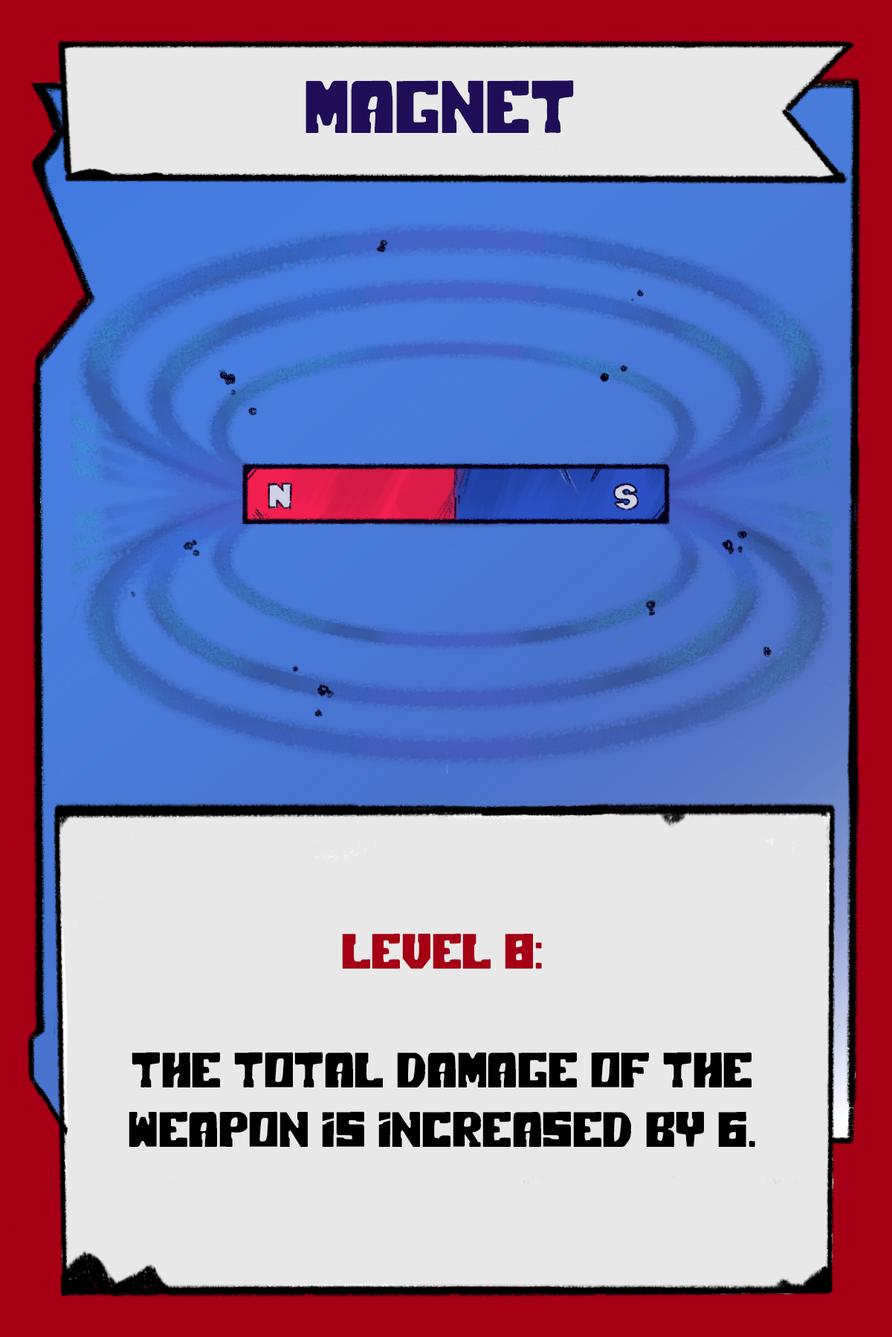
<style>
.page{position:relative;width:892px;height:1337px;background:#e8e8e8}
.page>*{position:absolute;margin:0}
.t1{font:74.3px "PolarPress";color:#1f0e57}
.t2{font:49.5px "PolarPress";color:#000000}
.t3{font:49.5px "PolarPress";color:#a50015}
.t4{font:49.5px "MyriadPro-Regular";color:#000000}
</style>
<div class="page">
<p class="t1" style="left:305px;top:80px;width:269px;height:53px">MAGNET</p>
<p class="t2" style="left:129px;top:934px;width:626px;height:213px;text-align:center"><span class="t3">LEVEL 8:<br><br></span>The total damage of the weapon is increased by 6.<br><span class="t4"><br></span></p>
</div>
